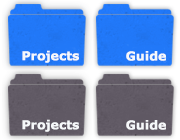
<style>
.page{position:relative;width:180px;height:140px}
.page>*{position:absolute;margin:0}
.t1{font:12px "Verdana-Bold";color:#f6f8fa;font-weight:bold}
</style>
<div class="page">
<p class="t1" style="left:22px;top:50px;width:57px;height:13px">Projects</p>
<p class="t1" style="left:126px;top:51px;width:40px;height:10px">Guide</p>
<p class="t1" style="left:22px;top:119px;width:57px;height:13px">Projects</p>
<p class="t1" style="left:126px;top:120px;width:40px;height:10px">Guide</p>
</div>
